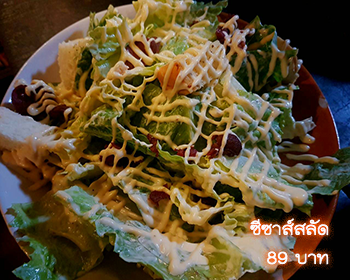
<style>
.page{position:relative;width:350px;height:280px}
.page>*{position:absolute;margin:0}
.t1{font:24px "THKodchasal";color:#ffffff}
</style>
<div class="page">
<p class="t1" style="left:250px;top:218px;width:79px;height:47px">ซีซาส์สลัด<br>บาท 89</p>
</div>
